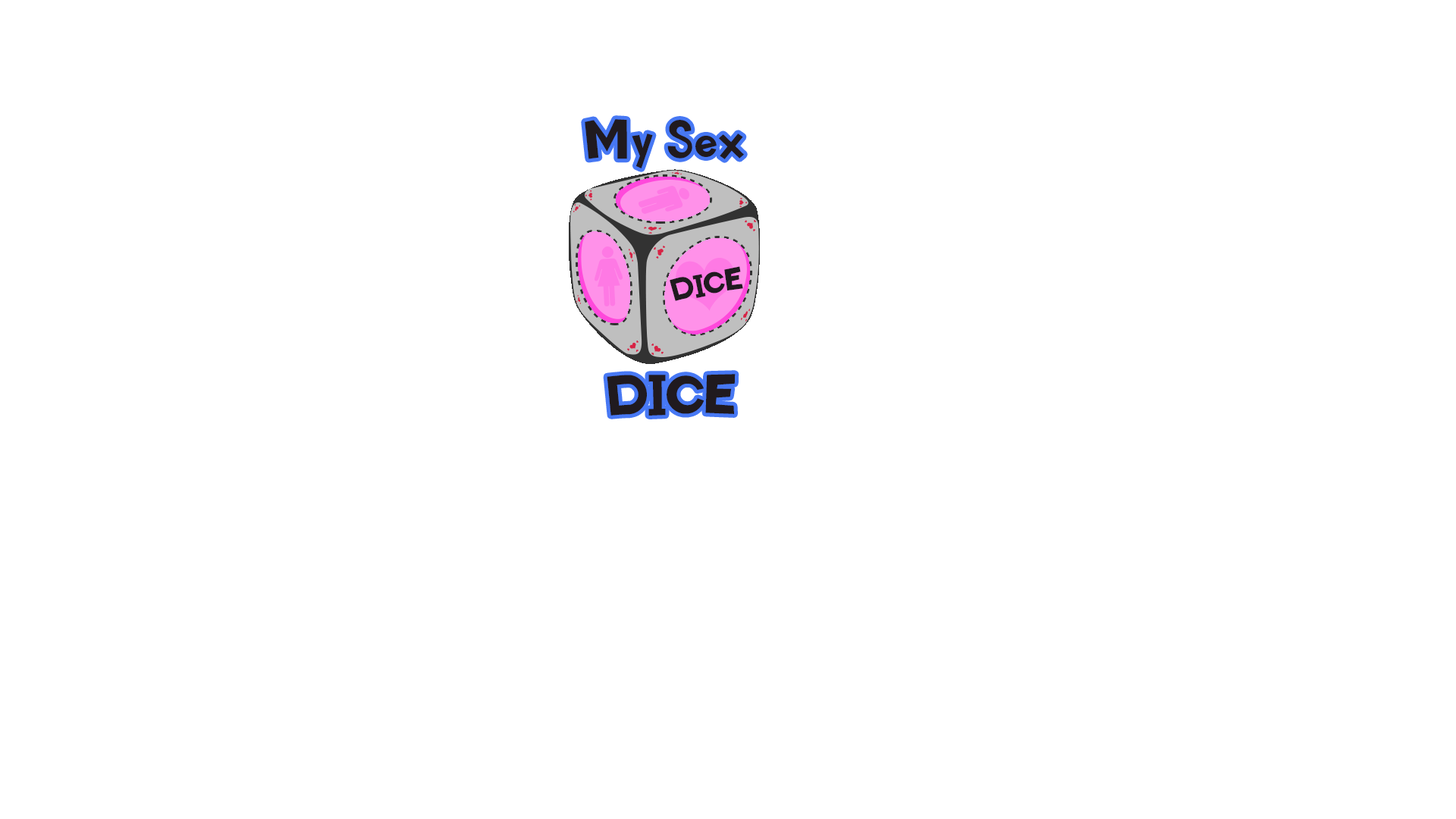
<style>
.page{position:relative;width:1456px;height:819px;background:#ffffff}
.page>*{position:absolute;margin:0}
.t1{font:54.6px "KidZone";color:#201a1f}
.t2{font:30.3px "KidZone";color:#201a1f}
</style>
<div class="page">
<p class="t1" style="left:585px;top:119px;width:159px;height:49px">My Sex</p>
<p class="t2" style="left:670px;top:266px;width:73px;height:35px;rotate:-10deg">DICE</p>
<p class="t1" style="left:607px;top:374px;width:129px;height:42px">DICE</p>
</div>
